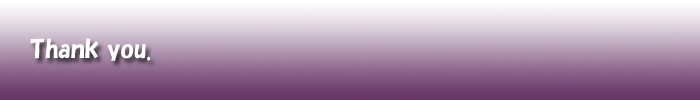
<style>
.page{position:relative;width:700px;height:100px}
.page>*{position:absolute;margin:0}
.t1{font:24px "HGPSoeiKakupoptai";color:#ffffff}
</style>
<div class="page">
<p class="t1" style="left:30px;top:38px;width:121px;height:23px">Thank you.</p>
</div>
